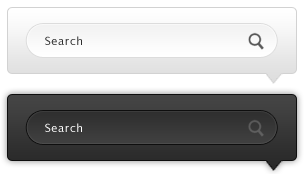
<style>
.page{position:relative;width:304px;height:174px}
.page>*{position:absolute;margin:0}
.t1{font:11px "LucidaGrande";letter-spacing:0.06em;color:#2f2f2f}
.t2{font:11px "LucidaGrande";letter-spacing:0.06em;color:#ffffff}
</style>
<div class="page">
<p class="t1" style="left:45px;top:36px;width:37px;height:9px">Search</p>
<p class="t2" style="left:45px;top:123px;width:37px;height:9px">Search</p>
</div>
